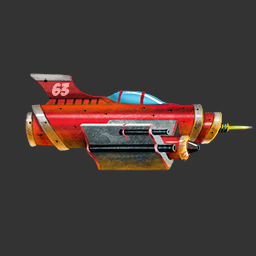
<style>
.page{position:relative;width:256px;height:256px;background:#333333}
.page>*{position:absolute;margin:0}
.t1{font:18.2px "BadaBoomBB";color:#f5a29f}
</style>
<div class="page">
<p class="t1" style="left:52px;top:83px;width:18px;height:13px">63</p>
<p class="t1" style="left:52px;top:83px;width:18px;height:13px">63</p>
</div>
